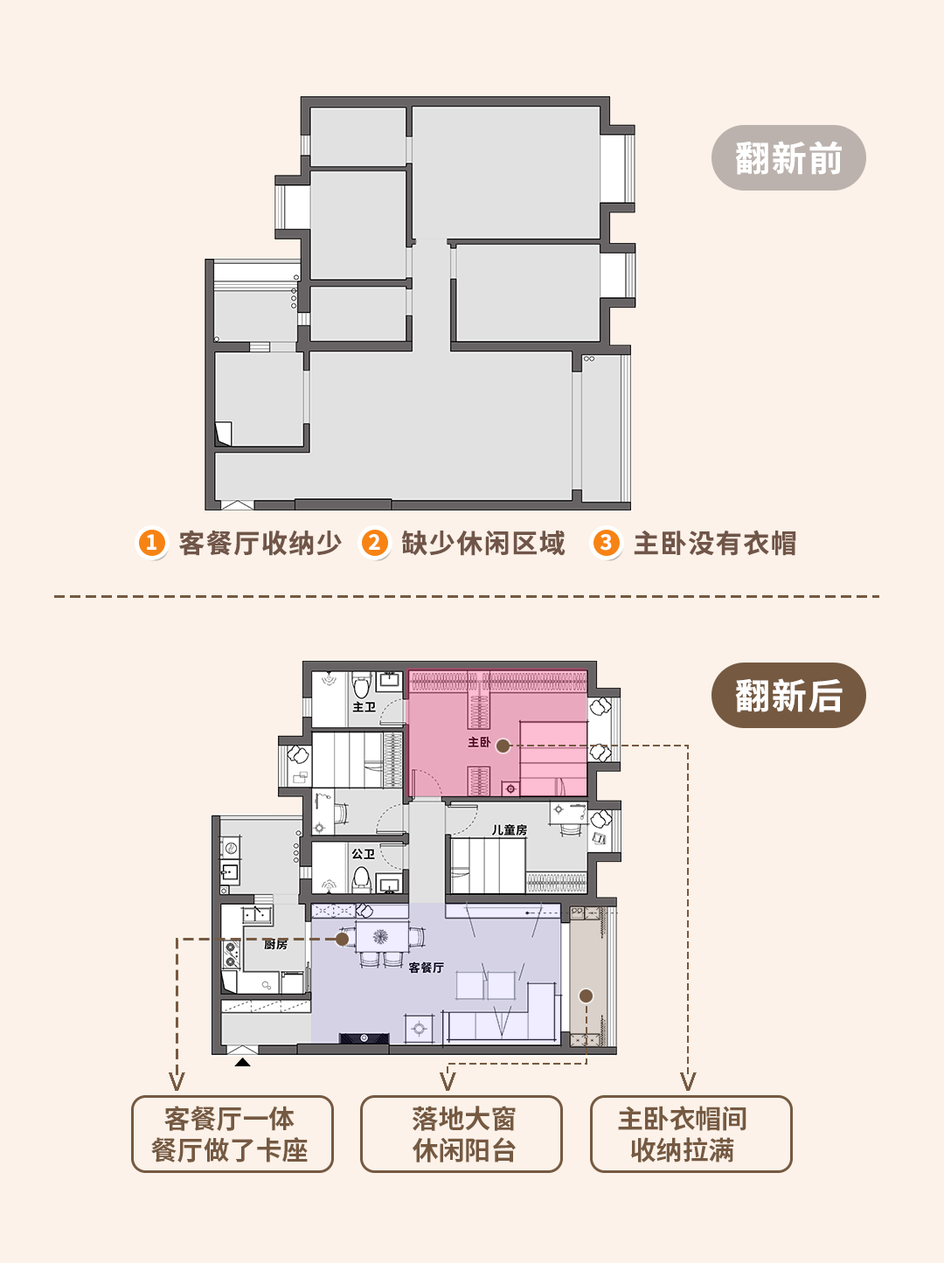
<style>
.page{position:relative;width:944px;height:1263px;background:#fcf2e9}
.page>*{position:absolute;margin:0}
.t1{font:35px "SourceHanSansSC-Bold";letter-spacing:0.05em;color:#ffffff}
.t2{font:26.2px "SourceHanSansSC-Bold";letter-spacing:0.05em;color:#705548}
.t3{font:20.9px "SourceHanSansSC-Bold";letter-spacing:0.05em;color:#ffffff}
.t4{font:26.2px "SourceHanSansSC-Bold";color:#755941}
</style>
<div class="page">
<p class="t1" style="left:735px;top:141px;width:107px;height:34px">翻新前</p>
<p class="t2" style="left:179px;top:530px;width:163px;height:26px">客餐厅收纳少</p>
<p class="t2" style="left:401px;top:531px;width:165px;height:25px">缺少休闲区域</p>
<p class="t2" style="left:634px;top:530px;width:162px;height:26px">主卧没有衣帽间</p>
<p class="t3" style="left:147px;top:534px;width:9px;height:16px">1</p>
<p class="t3" style="left:369px;top:534px;width:11px;height:16px">2</p>
<p class="t3" style="left:601px;top:534px;width:11px;height:17px">3</p>
<p class="t1" style="left:735px;top:678px;width:108px;height:34px">翻新后</p>
<p class="t4" style="left:151px;top:1106px;width:157px;height:57px;text-align:center">客餐厅一体<br>餐厅做了卡座</p>
<p class="t4" style="left:412px;top:1106px;width:104px;height:57px;text-align:center">落地大窗<br>休闲阳台</p>
<p class="t4" style="left:618px;top:1106px;width:128px;height:57px;text-align:center">主卧衣帽间<br>收纳拉满</p>
</div>
